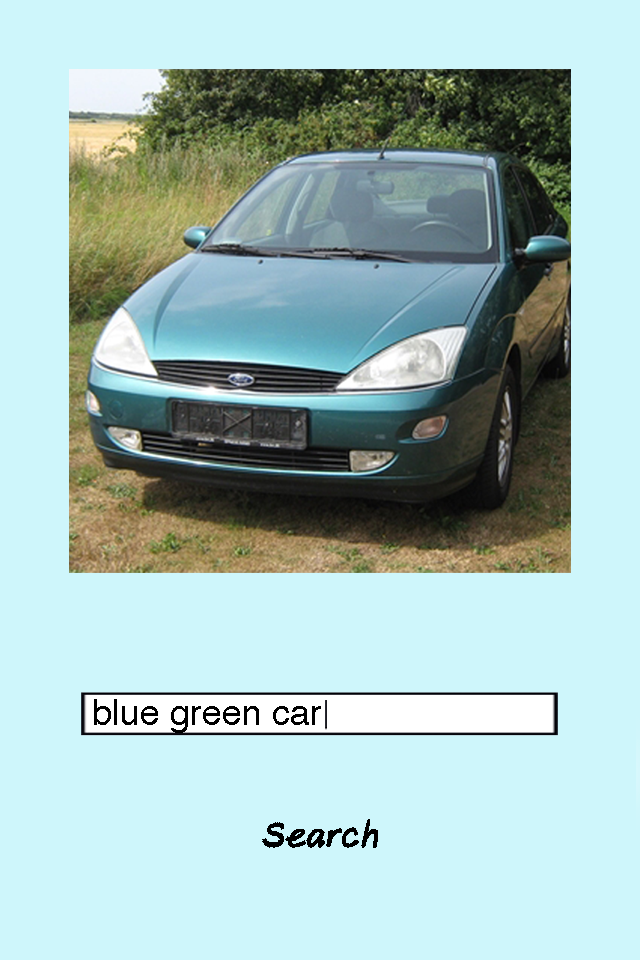
<style>
.page{position:relative;width:640px;height:960px;background:#cef6fb}
.page>*{position:absolute;margin:0}
.t1{font:36px "Helvetica";color:#000000}
.t2{font:36px "AxureHandwriting-BoldItalic";color:#000000}
</style>
<div class="page">
<p class="t1" style="left:94px;top:699px;width:227px;height:34px">blue green car</p>
<p class="t2" style="left:262px;top:819px;width:116px;height:29px">Search</p>
</div>
